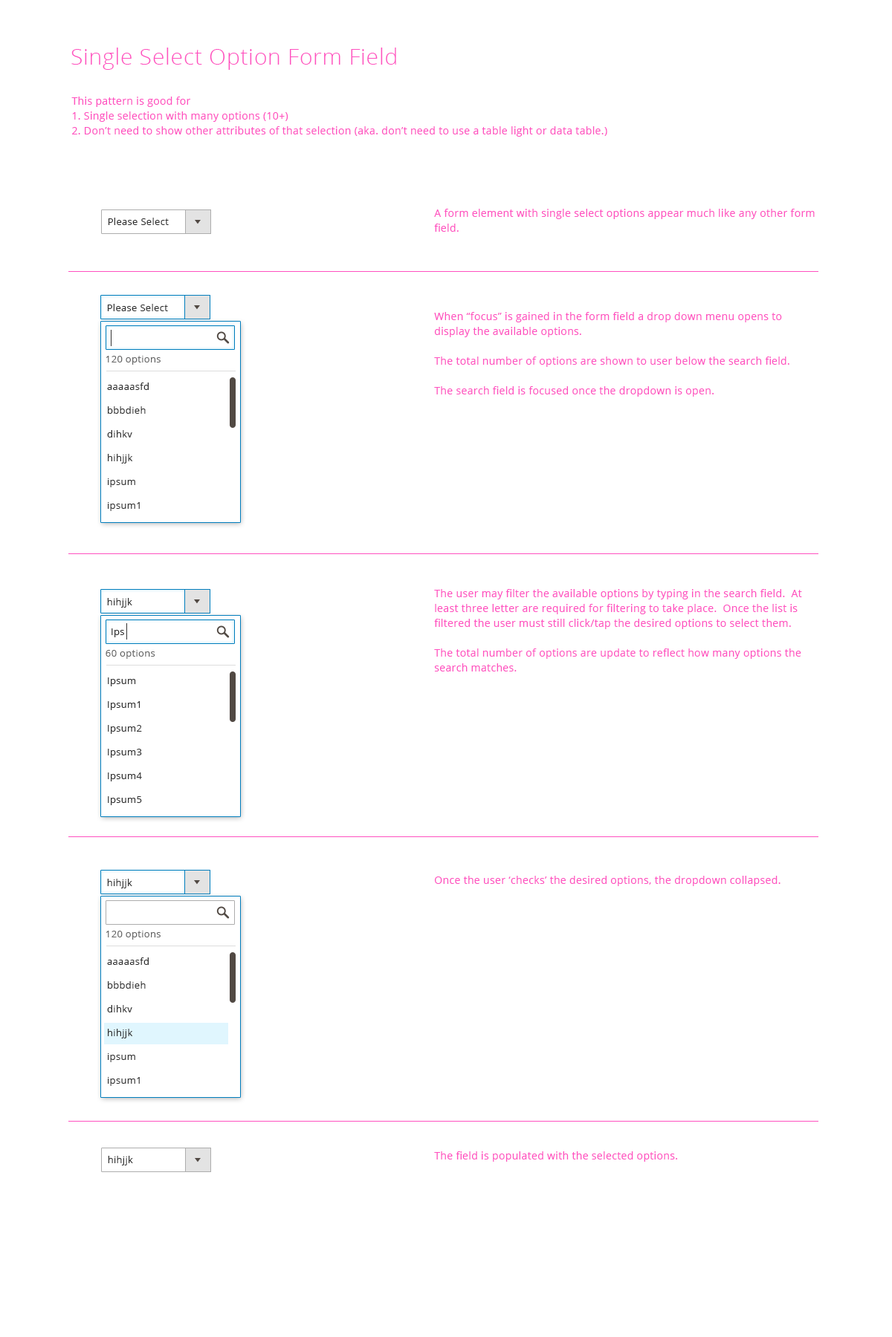
<style>
.page{position:relative;width:892px;height:1337px;background:#ffffff}
.page>*{position:absolute;margin:0}
.t1{font:22.3px "OpenSans-Light";letter-spacing:0.025em;color:#ff51c0}
.t2{font:10.4px/14.9px "OpenSans";letter-spacing:0.025em;color:#ff51c0}
.t3{font:9.7px "OpenSans";letter-spacing:0.025em;color:#303030}
.t4{font:9.7px "OpenSans";letter-spacing:0.025em;color:#666666}
.t5{font:9.7px/23.8px "OpenSans";letter-spacing:0.025em;color:#303030}
.t6{font:10.4px "OpenSans";letter-spacing:0.025em;color:#ff51c0}
</style>
<div class="page">
<p class="t1" style="left:71px;top:48px;width:325px;height:22px">Single Select Option Form Field</p>
<p class="t2" style="left:71px;top:97px;width:536px;height:40px">This pattern is good for <br>1. Single selection with many options (10+)<br>2. Don’t need to show other attributes of that selection (aka. don’t need to use a table light or data table.)</p>
<p class="t2" style="left:434px;top:209px;width:380px;height:23px">A form element with single select options appear much like any other form field.</p>
<p class="t3" style="left:108px;top:218px;width:61px;height:7px">Please Select</p>
<p class="t3" style="left:107px;top:304px;width:61px;height:7px">Please Select</p>
<p class="t2" style="left:434px;top:312px;width:355px;height:85px">When “focus” is gained in the form field a drop down menu opens to <br>display the available options. <br><br>The total number of options are shown to user below the search field.<br><br>The search field is focused once the dropdown is open.</p>
<p class="t4" style="left:106px;top:356px;width:54px;height:9px">120 options</p>
<p class="t5" style="left:107px;top:383px;width:42px;height:128px">aaaaasfd<br>bbbdieh<br>dihkv<br>hihjjk<br>ipsum<br>ipsum1</p>
<p class="t2" style="left:434px;top:589px;width:368px;height:83px">The user may filter the available options by typing in the search field.  At least three letter are required for filtering to take place.  Once the list is filtered the user must still click/tap the desired options to select them.<br><br>The total number of options are update to reflect how many options the <br>search matches.</p>
<p class="t3" style="left:107px;top:598px;width:25px;height:10px">hihjjk</p>
<p class="t3" style="left:111px;top:629px;width:13px;height:8px">Ips</p>
<p class="t4" style="left:106px;top:650px;width:49px;height:9px">60 options</p>
<p class="t5" style="left:108px;top:678px;width:34px;height:127px">Ipsum<br>Ipsum1<br>Ipsum2<br>Ipsum3<br>Ipsum4<br>Ipsum5</p>
<p class="t3" style="left:107px;top:879px;width:25px;height:10px">hihjjk</p>
<p class="t6" style="left:435px;top:876px;width:345px;height:10px">Once the user ‘checks’ the desired options, the dropdown collapsed.</p>
<p class="t4" style="left:106px;top:931px;width:54px;height:9px">120 options</p>
<p class="t5" style="left:107px;top:958px;width:42px;height:128px">aaaaasfd<br>bbbdieh<br>dihkv<br>hihjjk<br>ipsum<br>ipsum1</p>
<p class="t3" style="left:108px;top:1156px;width:25px;height:10px">hihjjk</p>
<p class="t6" style="left:434px;top:1152px;width:243px;height:10px">The field is populated with the selected options.</p>
</div>
